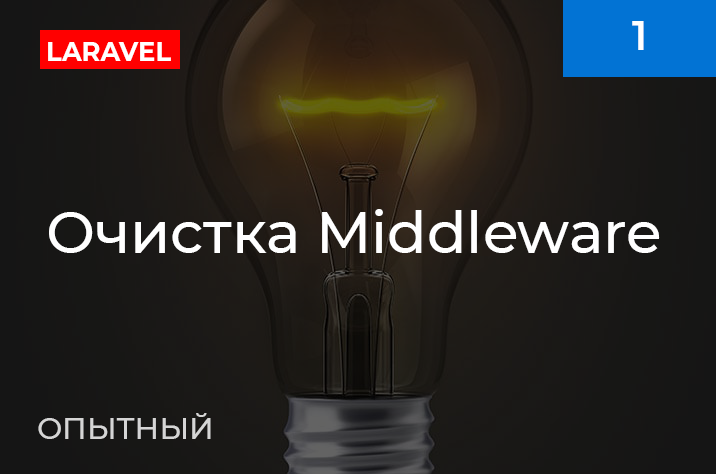
<style>
.page{position:relative;width:716px;height:474px}
.page>*{position:absolute;margin:0}
.t1{font:40px "Montserrat-SemiBold";color:#ffffff}
.t2{font:27px "Montserrat-Bold";color:#ffffff;scale:0.95 1}
.t3{font:58px "Montserrat-Medium";color:#ffffff}
.t4{font:30px "Montserrat-Medium";color:#d5d5d5}
</style>
<div class="page">
<p class="t1" style="left:632px;top:21px;width:12px;height:29px">1</p>
<p class="t2" style="left:48px;top:42px;width:123px;height:19px">LARAVEL</p>
<p class="t3" style="left:49px;top:209px;width:611px;height:44px">Очистка Middleware</p>
<p class="t4" style="left:38px;top:413px;width:173px;height:26px">ОПЫТНЫЙ</p>
</div>
